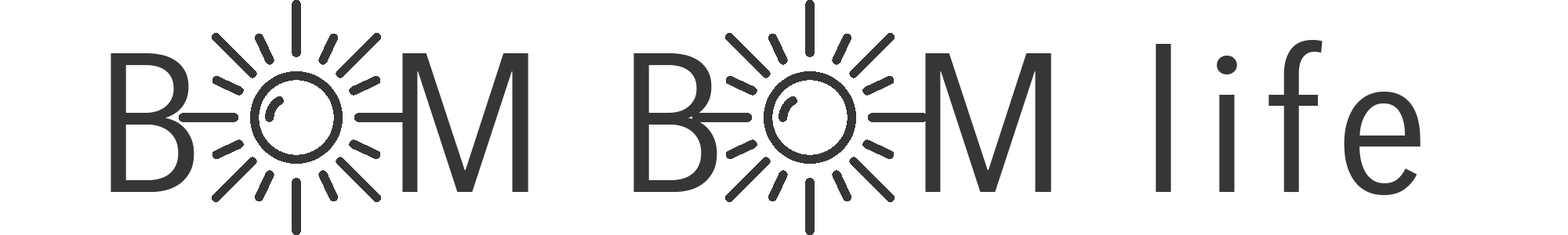
<style>
.page{position:relative;width:1568px;height:235px;background:#ffffff}
.page>*{position:absolute;margin:0}
.t1{font:196px "AvenirNextCondensed-Regular";letter-spacing:0.06em;color:#363636;scale:1.16 1}
</style>
<div class="page">
<p class="t1" style="left:111px;top:40px;width:1310px;height:155px">B   M B   M life</p>
</div>
